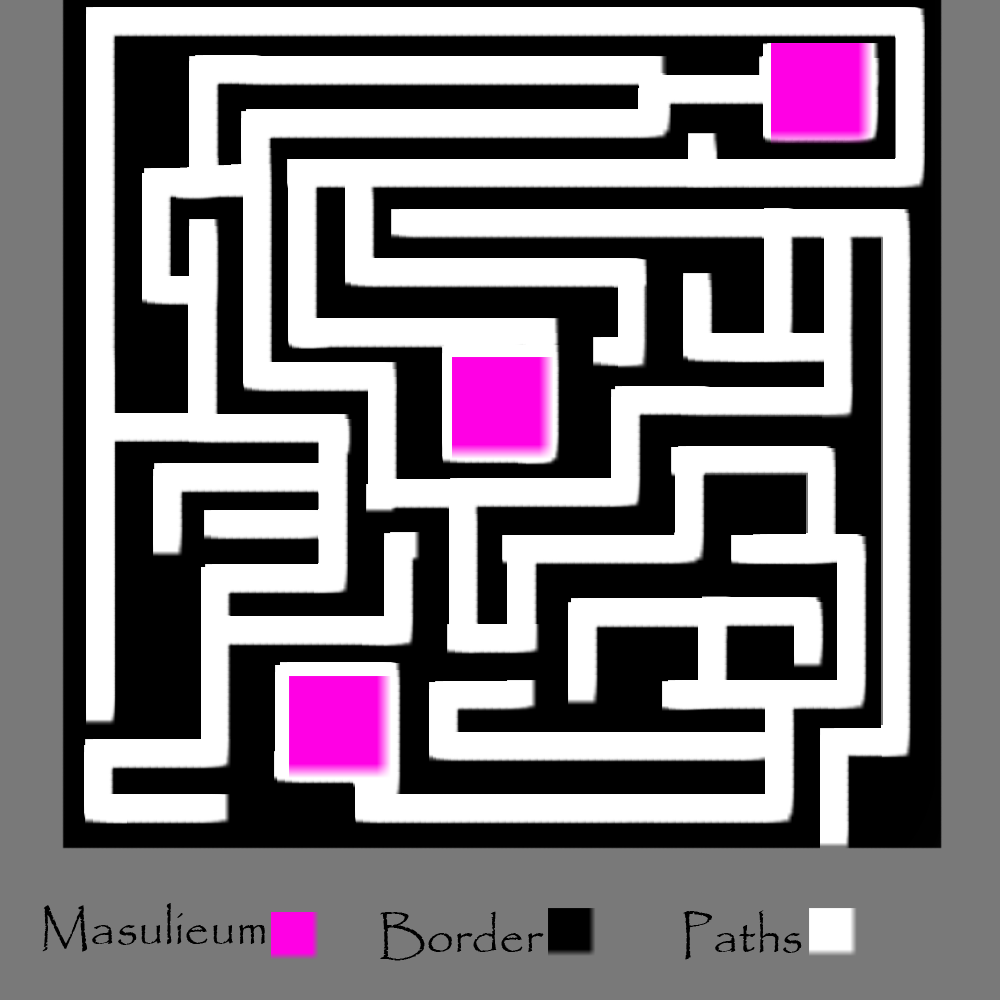
<style>
.page{position:relative;width:1000px;height:1000px;background:#000000}
.page>*{position:absolute;margin:0}
.t1{font:49.7px "Papyrus-Regular";color:#000000}
</style>
<div class="page">
<p class="t1" style="left:42px;top:903px;width:223px;height:49px">Masulieum</p>
<p class="t1" style="left:380px;top:911px;width:164px;height:50px">Border</p>
<p class="t1" style="left:683px;top:910px;width:119px;height:50px">Paths</p>
</div>
